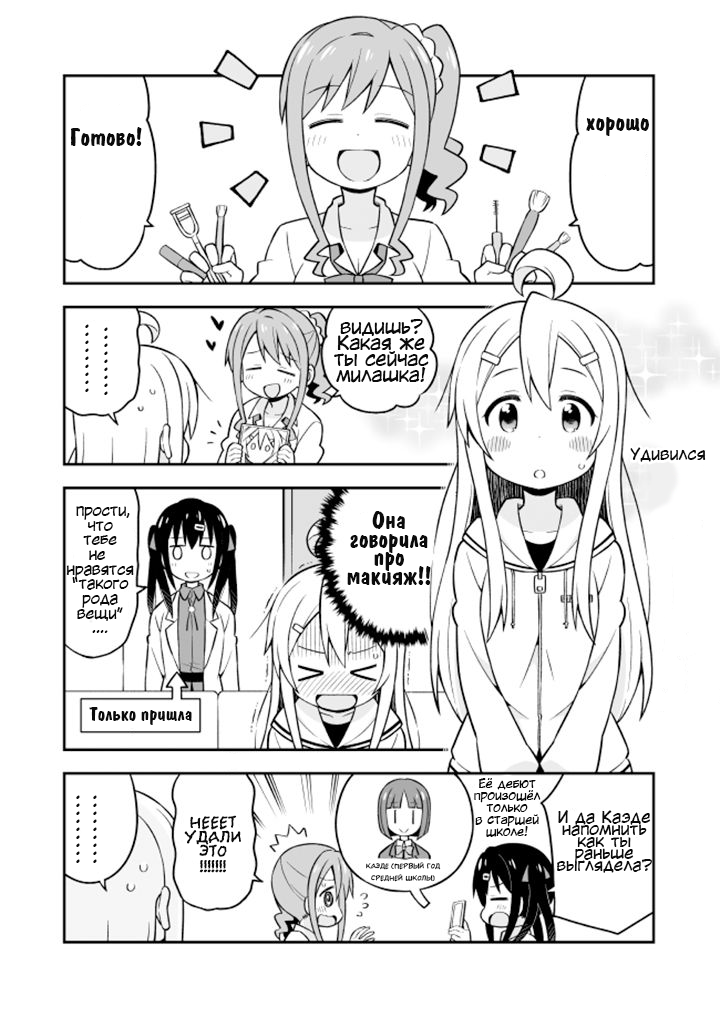
<style>
.page{position:relative;width:720px;height:1017px;background:#ffffff}
.page>*{position:absolute;margin:0}
.t1{font:24px "ADomInoBold";color:#0b0b0b}
.t2{font:18.7px/8px "KuraiVoice2";color:#0b0b0b}
.t3{font:18.7px/16px "KuraiVoice2";color:#0b0b0b}
.t4{font:16px "KuraiVoice2";color:#0b0b0b}
.t5{font:14.7px/14.7px "KuraiVoice2";color:#0b0b0b}
.t6{font:24px/18.7px "ADomInoBold";color:#0b0b0b}
.t7{font:18.7px "ADomInoBold";color:#0b0b0b}
.t8{font:12px/12px "KuraiVoice2";color:#0b0b0b}
.t9{font:18.7px/14.7px "el_CCEvilSchemes";color:#0b0b0b}
.t10{font:16px/12px "KuraiVoice2";color:#0b0b0b}
.t11{font:8px/12px "el_CCEvilSchemes";color:#0b0b0b}
</style>
<div class="page">
<p class="t1" style="left:586px;top:117px;width:63px;height:19px">хорошо</p>
<p class="t1" style="left:71px;top:127px;width:71px;height:19px">Готово!</p>
<p class="t2" style="left:85px;top:324px;width:4px;height:68px;text-align:center">.<br>.<br>.<br>.<br>.<br>.<br>.<br>.<br>.</p>
<p class="t2" style="left:104px;top:327px;width:4px;height:68px;text-align:center">.<br>.<br>.<br>.<br>.<br>.<br>.<br>.<br>.</p>
<p class="t3" style="left:334px;top:319px;width:95px;height:64px;text-align:center">видишь?<br>Какая же<br>ты сейчас<br>милашка!</p>
<p class="t4" style="left:630px;top:447px;width:76px;height:15px">Удивился</p>
<p class="t5" style="left:66px;top:506px;width:68px;height:127px;text-align:center">прости,<br>что<br>тебе<br>не <br>нравятся<br>“такого<br>рода<br>вещи”<br>….</p>
<p class="t6" style="left:347px;top:511px;width:84px;height:74px;text-align:center">Она<br>говорила<br>про<br>макияж!!</p>
<p class="t7" style="left:89px;top:707px;width:103px;height:18px">Только пришла</p>
<p class="t8" style="left:474px;top:778px;width:67px;height:59px;text-align:center">Её дебют<br>произошёл<br>только<br>в старшей<br>школе!</p>
<p class="t2" style="left:76px;top:795px;width:4px;height:68px;text-align:center">.<br>.<br>.<br>.<br>.<br>.<br>.<br>.<br>.</p>
<p class="t2" style="left:93px;top:795px;width:4px;height:68px;text-align:center">.<br>.<br>.<br>.<br>.<br>.<br>.<br>.<br>.</p>
<p class="t9" style="left:184px;top:815px;width:57px;height:58px;text-align:center">НЕЕЕТ<br>Удали<br>это<br>!!!!!!!</p>
<p class="t10" style="left:557px;top:810px;width:95px;height:63px;text-align:center">И да Каэде<br>напомнить<br>как ты<br>раньше<br>выглядела?</p>
<p class="t11" style="left:366px;top:862px;width:75px;height:20px;text-align:center">Каэде (первый год<br>средней школы)</p>
</div>
